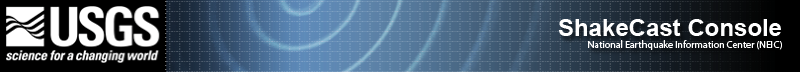
<style>
.page{position:relative;width:800px;height:72px}
.page>*{position:absolute;margin:0}
.t1{font:10px "MyriadPro-Regular";color:#ffffff}
.t2{font:24px "Arial-BoldMT";color:#ffffff}
</style>
<div class="page">
<p class="t1" style="left:558px;top:19px;width:224px;height:31px;text-align:right"><span class="t2">ShakeCast Console<br></span>National Earthquake Information Center (NEIC)</p>
</div>
